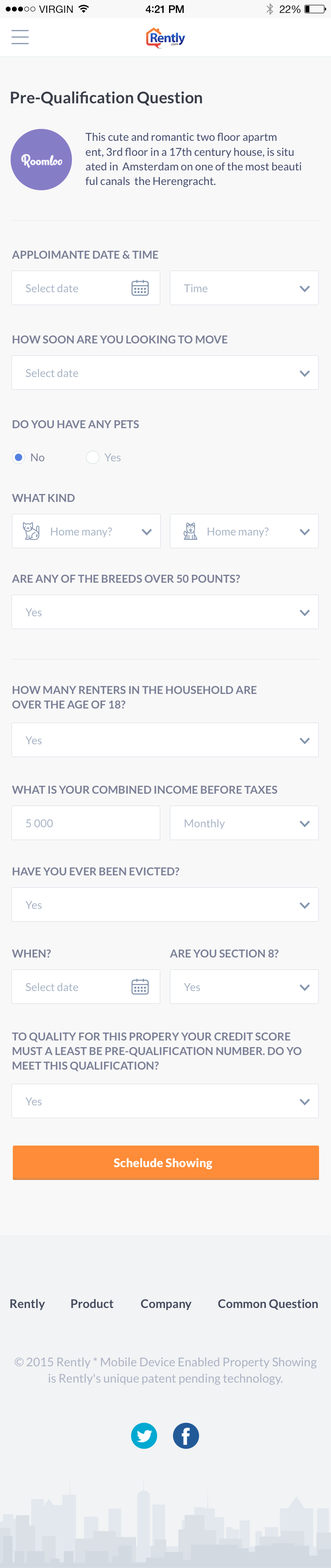
<style>
.page{position:relative;width:331px;height:1568px;background:#f8f8f8}
.page>*{position:absolute;margin:0}
.t1{font:10.2px "HelveticaNeue";letter-spacing:0.02em;color:#000000}
.t2{font:10.6px "HelveticaNeue-Medium";letter-spacing:-0.02em;color:#000000}
.t3{font:11.5px "Avenir-Medium";letter-spacing:-0.02em;color:#000000}
.t4{font:10.6px "HelveticaNeue";letter-spacing:-0.02em;color:#000000}
.t5{font:16px "Lato-Bold";color:#393d48}
.t6{font:11px/14.6px "Lato-Regular";color:#444c6d}
.t7{font:11px "Lato-Bold";color:#7a7f96;text-transform:uppercase}
.t8{font:11px "Lato-Regular";color:#a8b4c5}
.t9{font:11px "Lato-Regular";color:#7a7f96}
.t10{font:11px "Lato-Regular";color:#a6b2c3}
.t11{font:11px/14.6px "Lato-Bold";color:#7a7f96;text-transform:uppercase}
.t12{font:12px "Lato-Black";color:#ffffff}
.t13{font:12px "Lato-Bold";color:#454b5e}
.t14{font:12px/16.3px "Lato-Regular";color:#acb2c5}
</style>
<div class="page">
<p class="t1" style="left:39px;top:5px;width:34px;height:8px">VIRGIN</p>
<p class="t2" style="left:146px;top:5px;width:38px;height:8px">4<span class="t3">:</span>21 PM</p>
<p class="t4" style="left:279px;top:5px;width:22px;height:8px">22%</p>
<p class="t5" style="left:11px;top:91px;width:191px;height:15px">Pre-Qualification Question</p>
<p class="t6" style="left:85px;top:132px;width:217px;height:55px">This cute and romantic two floor apartm<br>ent, 3rd floor in a 17th century house, is situ<br>ated in  Amsterdam on one of the most beauti<br>ful canals  the Herengracht.</p>
<p class="t7" style="left:12px;top:250px;width:146px;height:9px">apploimante date &amp; time</p>
<p class="t8" style="left:26px;top:284px;width:52px;height:9px">Select date</p>
<p class="t8" style="left:184px;top:284px;width:23px;height:9px">Time</p>
<p class="t7" style="left:12px;top:335px;width:216px;height:9px">how soon are you looking to move</p>
<p class="t8" style="left:26px;top:369px;width:52px;height:8px">Select date</p>
<p class="t7" style="left:12px;top:420px;width:127px;height:9px">do you have any pets</p>
<p class="t9" style="left:31px;top:453px;width:14px;height:9px">No</p>
<p class="t10" style="left:104px;top:453px;width:17px;height:9px">Yes</p>
<p class="t7" style="left:12px;top:494px;width:63px;height:8px">what kind</p>
<p class="t8" style="left:51px;top:528px;width:61px;height:10px">Home many?</p>
<p class="t8" style="left:207px;top:528px;width:62px;height:10px">Home many?</p>
<p class="t7" style="left:12px;top:574px;width:228px;height:9px">are any of the breeds over 50 pounts?</p>
<p class="t8" style="left:25px;top:608px;width:17px;height:9px">Yes</p>
<p class="t11" style="left:12px;top:686px;width:245px;height:23px">how many renters in the household are<br>over the age of 18?</p>
<p class="t8" style="left:25px;top:736px;width:17px;height:9px">Yes</p>
<p class="t7" style="left:12px;top:785px;width:266px;height:9px">what is your combined income before taxes</p>
<p class="t8" style="left:26px;top:819px;width:27px;height:9px">5 000</p>
<p class="t8" style="left:185px;top:819px;width:40px;height:10px">Monthly</p>
<p class="t7" style="left:12px;top:867px;width:167px;height:9px">have you ever been evicted?</p>
<p class="t8" style="left:25px;top:901px;width:17px;height:8px">Yes</p>
<p class="t7" style="left:12px;top:949px;width:39px;height:9px">when?</p>
<p class="t7" style="left:170px;top:949px;width:109px;height:9px">are you section 8?</p>
<p class="t8" style="left:26px;top:983px;width:52px;height:8px">Select date</p>
<p class="t8" style="left:184px;top:983px;width:16px;height:8px">Yes</p>
<p class="t11" style="left:12px;top:1032px;width:290px;height:39px">to quality for this propery your credit score<br>must a least be pre-qualification number. do yo<br>meet this qualification?</p>
<p class="t8" style="left:25px;top:1097px;width:17px;height:9px">Yes</p>
<p class="t12" style="left:113px;top:1158px;width:99px;height:11px">Schelude Showing</p>
<p class="t13" style="left:10px;top:1299px;width:35px;height:11px">Rently</p>
<p class="t13" style="left:71px;top:1299px;width:42px;height:9px">Product</p>
<p class="t13" style="left:141px;top:1299px;width:51px;height:11px">Company</p>
<p class="t13" style="left:218px;top:1299px;width:100px;height:11px">Common Question</p>
<p class="t14" style="left:15px;top:1357px;width:302px;height:28px;text-align:center">© 2015 Rently * Mobile Device Enabled Property Showing<br>is Rently's unique patent pending technology.</p>
</div>
